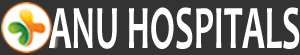
<style>
.page{position:relative;width:300px;height:55px;background:#333333}
.page>*{position:absolute;margin:0}
.t1{font:62.5px "Candara-Bold";color:#ffffff;scale:0.57 1}
</style>
<div class="page">
<p class="t1" style="left:49px;top:7px;width:251px;height:42px">ANU HOSPITALS</p>
</div>
